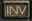
<style>
.page{position:relative;width:32px;height:21px}
.page>*{position:absolute;margin:0}
.t1{font:11.3px "Helvetica-Light";letter-spacing:-0.05em;color:#b29f87;scale:1.2 1}
</style>
<div class="page">
<p class="t1" style="left:7px;top:6px;width:20px;height:8px">INV</p>
</div>
